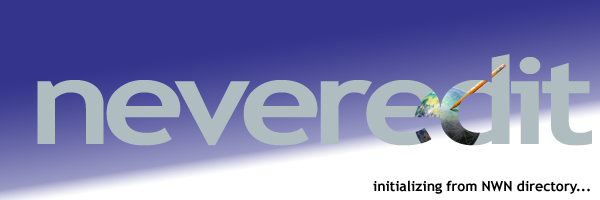
<style>
.page{position:relative;width:600px;height:200px;background:#34348c}
.page>*{position:absolute;margin:0}
.t1{font:120px "TrebuchetMS-Bold";letter-spacing:-0.075em;color:#afbdc1;scale:1.2 1}
.t2{font:14px "TrebuchetMS-Bold";color:#000000}
</style>
<div class="page">
<p class="t1" style="left:37px;top:54px;width:555px;height:92px">neveredit</p>
<p class="t2" style="left:373px;top:180px;width:217px;height:14px">initializing from NWN directory...</p>
</div>
